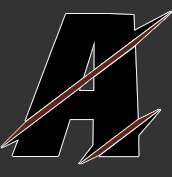
<style>
.page{position:relative;width:172px;height:177px;background:#333333}
.page>*{position:absolute;margin:0}
.t1{font:201.7px "MX-Regular";color:#000000;scale:0.88 1}
</style>
<div class="page">
<p class="t1" style="left:1px;top:11px;width:171px;height:153px">A</p>
</div>
